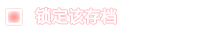
<style>
.page{position:relative;width:218px;height:30px;background:#ffffff}
.page>*{position:absolute;margin:0}
.t1{font:16px "SourceHanSansSC-Regular";color:#ffffff;font-weight:bold}
</style>
<div class="page">
<p class="t1" style="left:35px;top:8px;width:81px;height:16px">锁定该存档</p>
</div>
